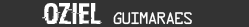
<style>
.page{position:relative;width:249px;height:27px;background:#333333}
.page>*{position:absolute;margin:0}
.t1{font:18px "DataControl";color:#ffffff}
.t2{font:30px "HACKED";color:#ffffff}
</style>
<div class="page">
<p class="t1" style="left:42px;top:3px;width:150px;height:22px"><span class="t2">Oziel  </span>Guimaraes</p>
</div>
